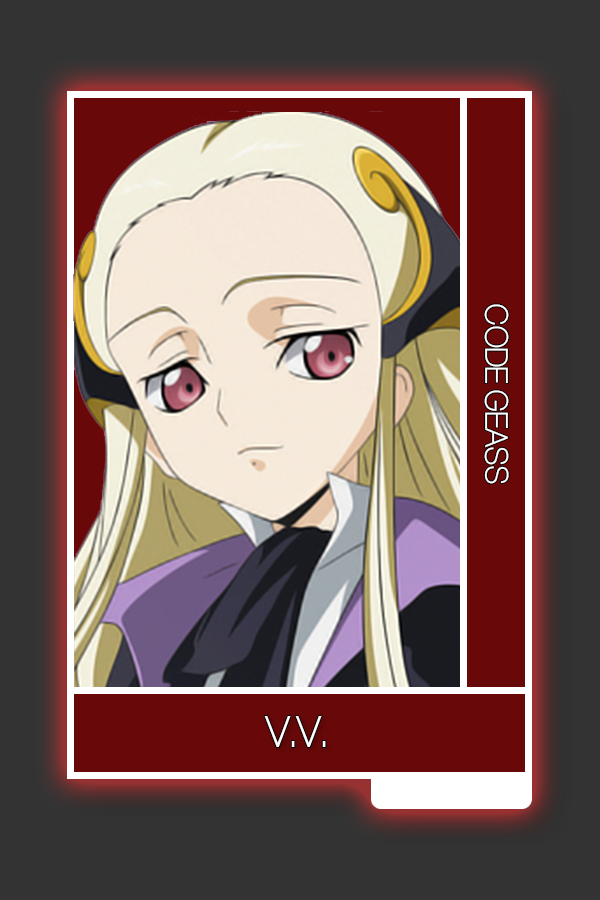
<style>
.page{position:relative;width:600px;height:900px;background:#333333}
.page>*{position:absolute;margin:0}
.t1{font:31.2px "Aliquam";color:#ffffff}
.t2{font:43.2px "Aliquam";color:#ffffff}
</style>
<div class="page">
<p class="t1" style="left:484px;top:304px;width:25px;height:180px;rotate:90deg">CODE GEASS</p>
<p class="t2" style="left:264px;top:716px;width:62px;height:31px">V.V.</p>
</div>
